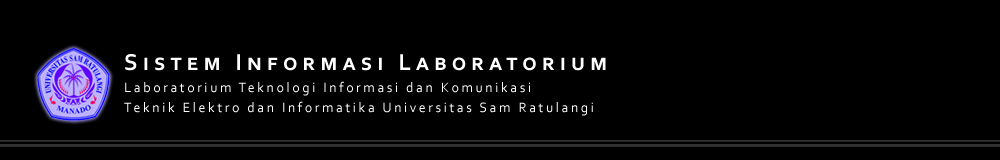
<style>
.page{position:relative;width:1000px;height:160px;background:#000000}
.page>*{position:absolute;margin:0}
.t1{font:24px "Corbel-Bold";letter-spacing:0.2em;color:#ffffff;font-variant:small-caps}
.t2{font:14px/20px "Corbel";letter-spacing:0.18em;color:#ffffff}
</style>
<div class="page">
<p class="t1" style="left:125px;top:54px;width:481px;height:17px">Sistem Informasi Laboratorium</p>
<p class="t2" style="left:124px;top:81px;width:469px;height:35px">Laboratorium Teknologi Informasi dan Komunikasi<br>Teknik Elektro dan Informatika Universitas Sam Ratulangi</p>
</div>
